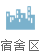
<style>
.page{position:relative;width:40px;height:55px;background:#ffffff}
.page>*{position:absolute;margin:0}
.t1{font:22.5px "SimSun";letter-spacing:0.05em;color:#666666;font-variant:small-caps}
</style>
<div class="page">
<p class="t1" style="left:1px;top:39px;width:38px;height:12px">宿舍区</p>
</div>
